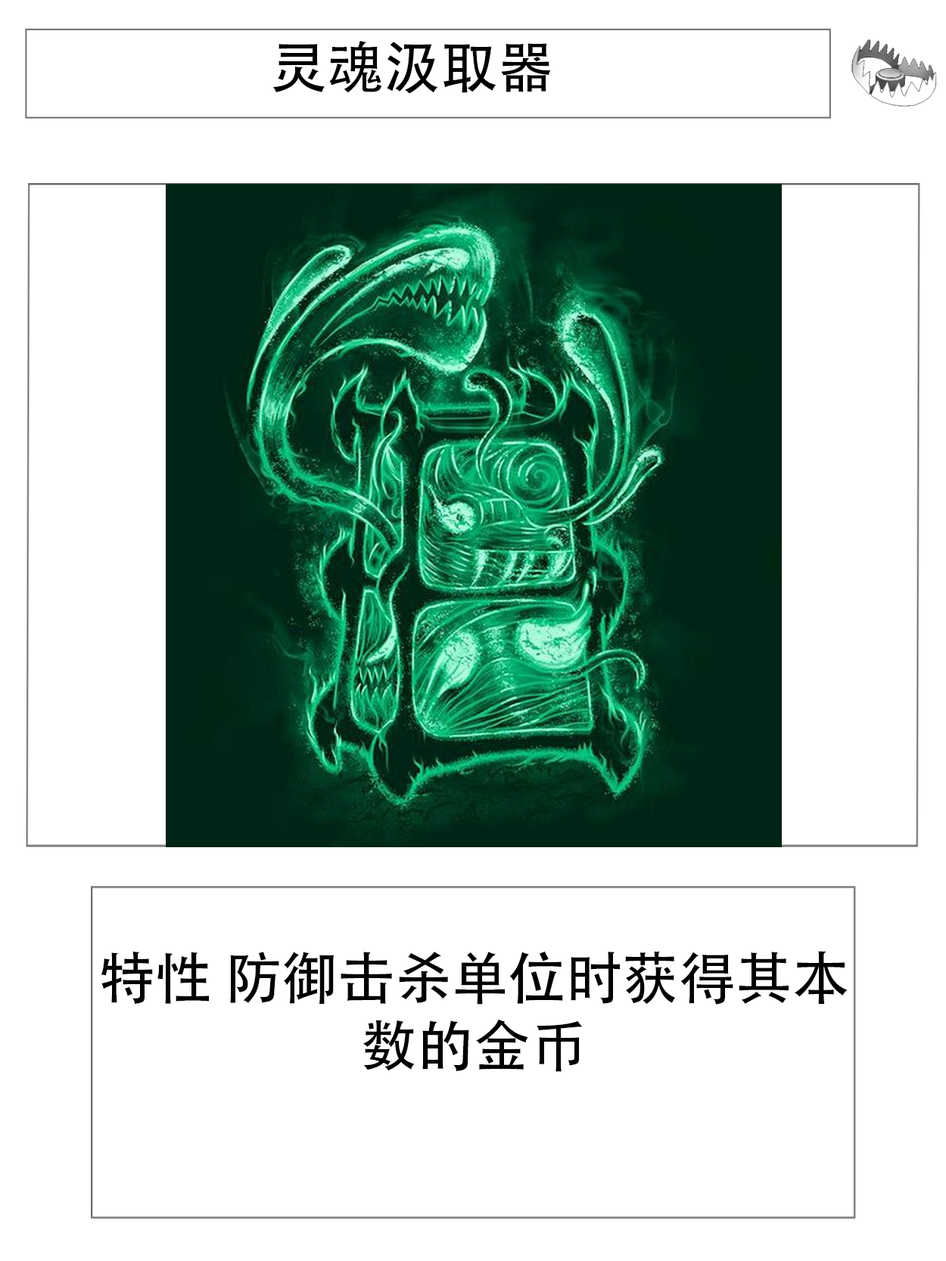
<style>
.page{position:relative;width:946px;height:1261px;background:#ffffff}
.page>*{position:absolute;margin:0}
.t1{font:56.7px "AdobeHeitiStd-Regular";color:#000000}
</style>
<div class="page">
<p class="t1" style="left:272px;top:40px;width:279px;height:54px">灵魂汲取器</p>
<p class="t1" style="left:101px;top:951px;width:746px;height:121px;text-align:center">特性 防御击杀单位时获得其本数的金币</p>
</div>
